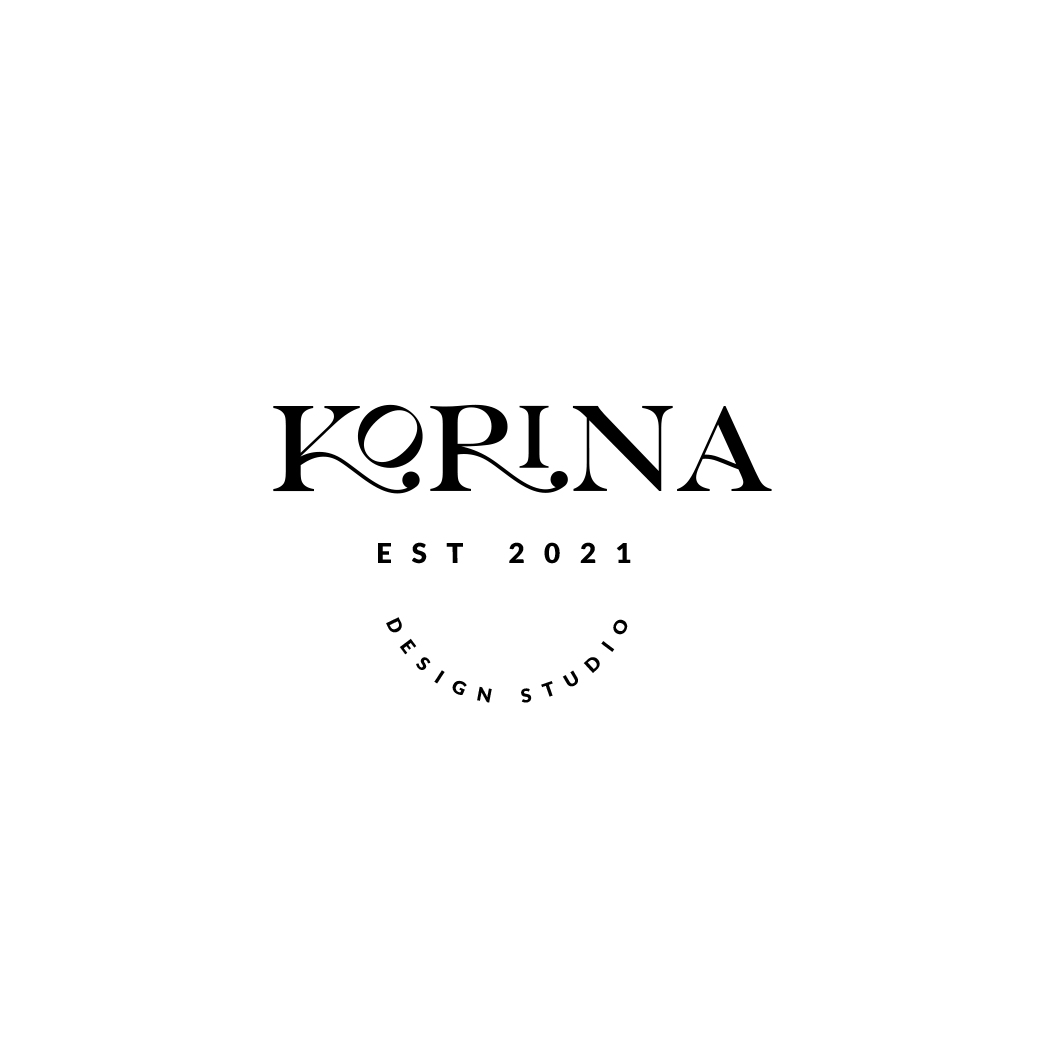
<style>
.page{position:relative;width:1042px;height:1043px;background:#ffffff}
.page>*{position:absolute;margin:0}
.t1{font:121.7px "LorettoRegular";color:#000000;text-transform:uppercase}
.t2{font:27.3px "Lato-Black";letter-spacing:0.7em;color:#000000;text-transform:uppercase}
.t3{font:18.8px "Lato-Black";letter-spacing:0.7em;color:#000000;text-transform:uppercase}
</style>
<div class="page">
<p class="t1" style="left:273px;top:404px;width:499px;height:90px">KORINA</p>
<p class="t2" style="left:378px;top:542px;width:253px;height:22px">EST 2021</p>
<p class="t3" style="left:386px;top:617px;width:242px;height:86px;text-align:center">DESIGN STUDIO</p>
</div>
